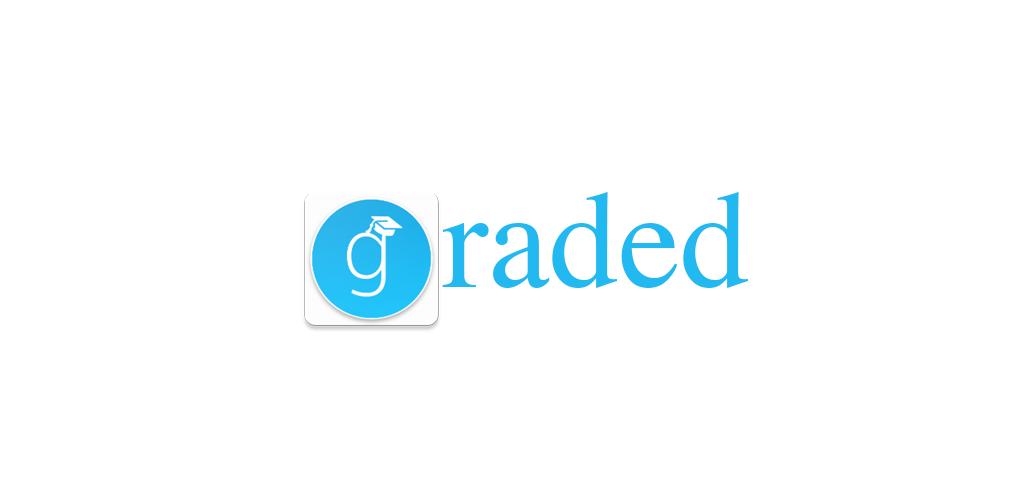
<style>
.page{position:relative;width:1024px;height:500px;background:#ffffff}
.page>*{position:absolute;margin:0}
.t1{font:138.6px "Times-Roman";color:#22b9f1}
</style>
<div class="page">
<p class="t1" style="left:442px;top:192px;width:306px;height:96px">raded</p>
</div>
